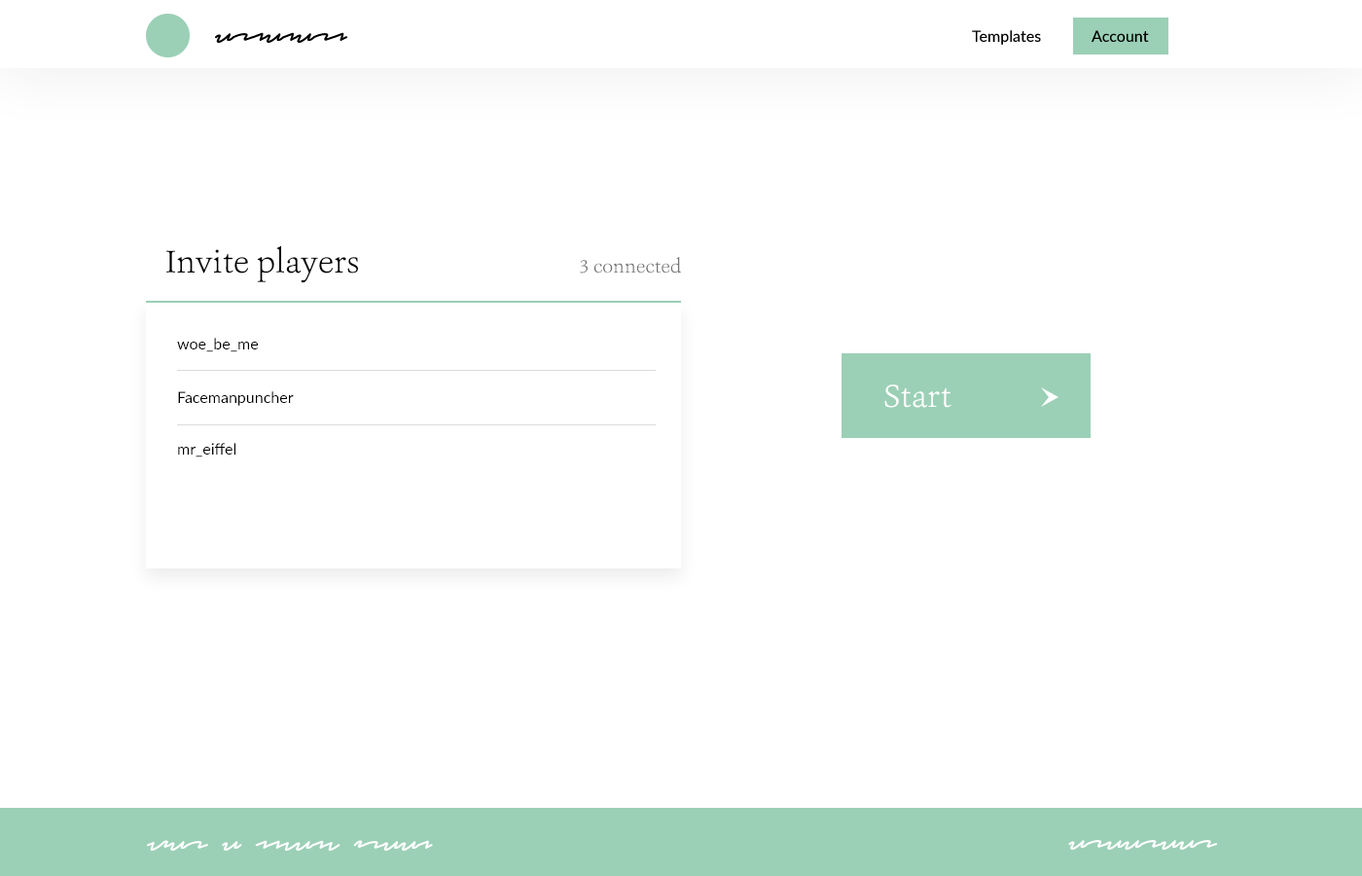
<style>
.page{position:relative;width:1362px;height:876px;background:#ffffff}
.page>*{position:absolute;margin:0}
.t1{font:33.1px "Ashbury-Light";color:#000000}
.t2{font:19.5px "Ashbury-Light";color:#717171}
.t3{font:15.6px "Lato-Regular";color:#000000}
.t4{font:33.1px "Ashbury-Light";color:#ffffff}
</style>
<div class="page">
<p class="t1" style="left:166px;top:245px;width:192px;height:38px">Invite players</p>
<p class="t2" style="left:580px;top:257px;width:101px;height:16px">3 connected</p>
<p class="t3" style="left:177px;top:338px;width:81px;height:14px">woe_be_me</p>
<p class="t4" style="left:884px;top:384px;width:67px;height:24px">Start</p>
<p class="t3" style="left:178px;top:391px;width:116px;height:15px">Facemanpuncher</p>
<p class="t3" style="left:178px;top:443px;width:57px;height:14px">mr_eiffel</p>
</div>
